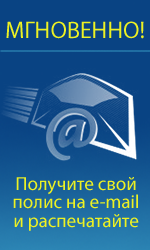
<style>
.page{position:relative;width:150px;height:250px;background:#094383}
.page>*{position:absolute;margin:0}
.t1{font:24px "MyriadPro-Regular";color:#edf123}
.t2{font:19px/18px "MyriadPro-Regular";color:#edf123}
</style>
<div class="page">
<p class="t1" style="left:6px;top:21px;width:138px;height:18px">МГНОВЕННО!</p>
<p class="t2" style="left:13px;top:177px;width:126px;height:54px;text-align:center">Получите свой полис на e-mail и распечатайте</p>
</div>
